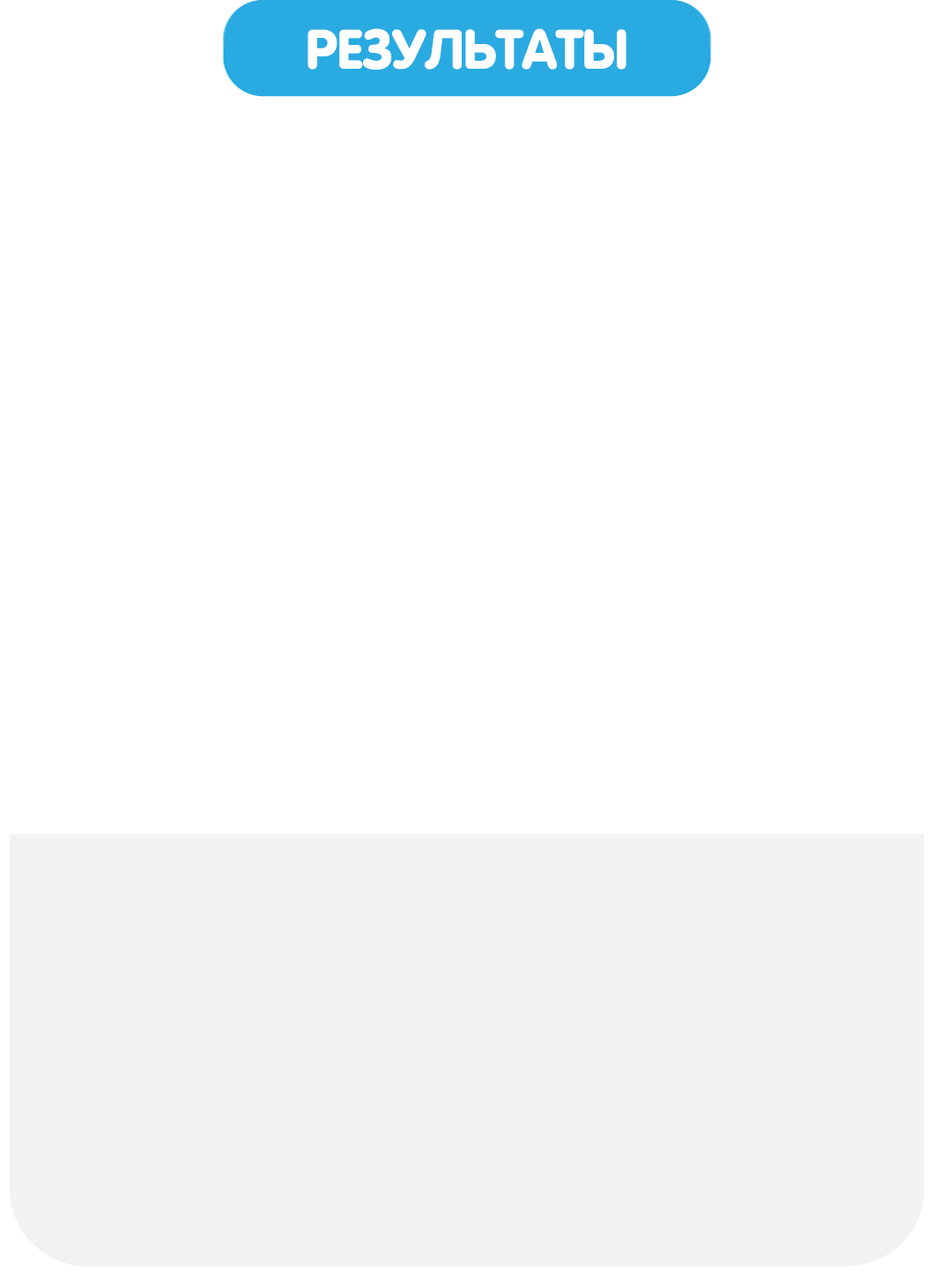
<style>
.page{position:relative;width:934px;height:1276px;background:#ffffff}
.page>*{position:absolute;margin:0}
.t1{font:54.6px "VAGWorld-Bold";color:#ffffff}
</style>
<div class="page">
<p class="t1" style="left:308px;top:28px;width:319px;height:42px">РЕЗУЛЬТАТЫ</p>
</div>
